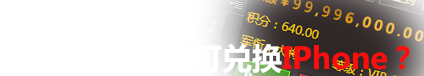
<style>
.page{position:relative;width:424px;height:76px;background:#ffffff}
.page>*{position:absolute;margin:0}
.t1{font:30px "MicrosoftYaHei-Bold";color:#ff0c0c}
.t2{font:30px "MicrosoftYaHei-Bold";color:#ffffff}
</style>
<div class="page">
<p class="t1" style="left:132px;top:43px;width:278px;height:31px"><span class="t2">积分可兑换</span>IPhone？</p>
</div>
